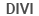
<style>
.page{position:relative;width:39px;height:16px;background:#ffffff}
.page>*{position:absolute;margin:0}
.t1{font:15px "Roboto-Medium";color:#4a4a4a}
</style>
<div class="page">
<p class="t1" style="left:6px;top:3px;width:27px;height:11px">DIVI</p>
</div>
